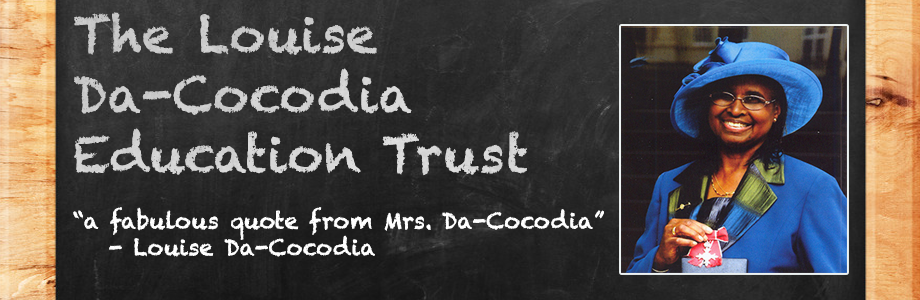
<style>
.page{position:relative;width:920px;height:300px}
.page>*{position:absolute;margin:0}
.t1{font:49.9px "Chalkduster";color:#d1d1d1}
.t2{font:22.2px "Chalkduster";color:#ffffff}
</style>
<div class="page">
<p class="t1" style="left:74px;top:12px;width:453px;height:164px">The Louise<br>Da-Cocodia<br>Education Trust</p>
<p class="t2" style="left:73px;top:207px;width:531px;height:50px">“a fabulous quote from Mrs. Da-Cocodia”<br> - Louise Da-Cocodia</p>
</div>
